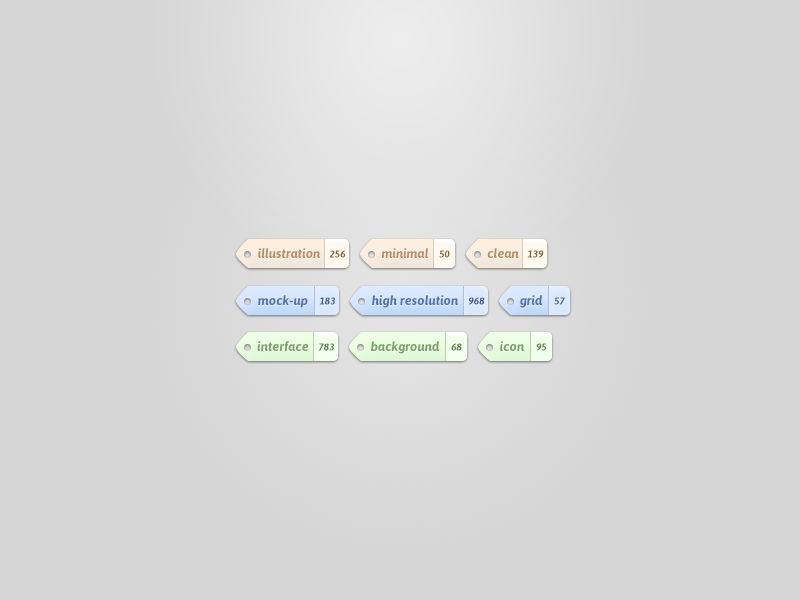
<style>
.page{position:relative;width:800px;height:600px;background:#d6d6d6}
.page>*{position:absolute;margin:0}
.t1{font:13px "Asap-BoldItalic";color:#b98f5e}
.t2{font:10px "Asap-BoldItalic";color:#8a6439}
.t3{font:13px "Asap-BoldItalic";color:#5573a6}
.t4{font:10px "Asap-BoldItalic";color:#415e8f}
.t5{font:13px "Asap-BoldItalic";color:#78a266}
.t6{font:10px "Asap-BoldItalic";color:#578842}
</style>
<div class="page">
<p class="t1" style="left:258px;top:248px;width:62px;height:10px">illustration</p>
<p class="t2" style="left:329px;top:250px;width:17px;height:8px">256</p>
<p class="t1" style="left:381px;top:248px;width:47px;height:10px">minimal</p>
<p class="t2" style="left:439px;top:250px;width:11px;height:8px">50</p>
<p class="t1" style="left:487px;top:248px;width:32px;height:10px">clean</p>
<p class="t2" style="left:527px;top:250px;width:17px;height:8px">139</p>
<p class="t3" style="left:258px;top:295px;width:50px;height:13px">mock-up</p>
<p class="t4" style="left:319px;top:297px;width:16px;height:8px">183</p>
<p class="t3" style="left:372px;top:295px;width:86px;height:13px">high resolution</p>
<p class="t4" style="left:469px;top:297px;width:16px;height:8px">968</p>
<p class="t3" style="left:520px;top:295px;width:22px;height:13px">grid</p>
<p class="t4" style="left:554px;top:297px;width:11px;height:8px">57</p>
<p class="t5" style="left:257px;top:341px;width:52px;height:10px">interface</p>
<p class="t5" style="left:371px;top:341px;width:68px;height:13px">background</p>
<p class="t5" style="left:500px;top:341px;width:24px;height:10px">icon</p>
<p class="t6" style="left:319px;top:343px;width:15px;height:8px">783</p>
<p class="t6" style="left:451px;top:343px;width:11px;height:8px">68</p>
<p class="t6" style="left:536px;top:343px;width:11px;height:8px">95</p>
</div>
